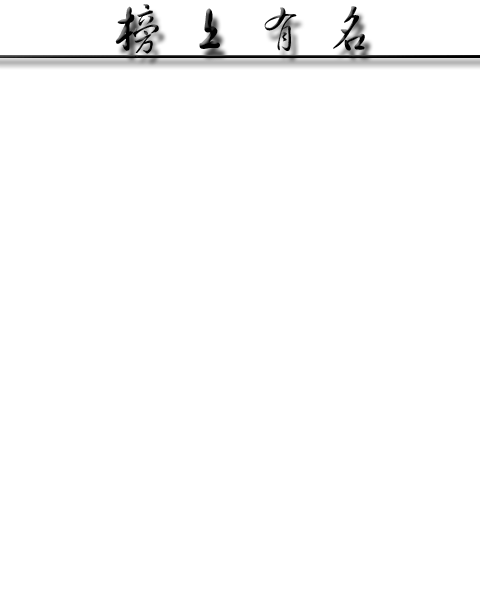
<style>
.page{position:relative;width:480px;height:615px;background:#ffffff}
.page>*{position:absolute;margin:0}
.t1{font:60px "FZHCJW--GB1-0";color:#000000}
</style>
<div class="page">
<p class="t1" style="left:115px;top:4px;width:250px;height:50px">榜 上 有 名</p>
</div>
